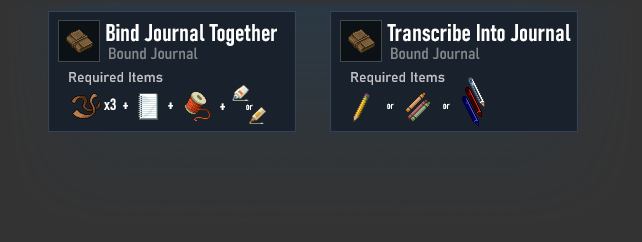
<style>
.page{position:relative;width:642px;height:242px;background:#19222c}
.page>*{position:absolute;margin:0}
.t1{font:24px "Bahnschrift-SemiBoldCondensed";color:#ffffff}
.t2{font:16px "Bahnschrift-SemiCondensed";color:#85888b}
.t3{font:14px "Bahnschrift";color:#c2c3c5}
.t4{font:16px "Bahnschrift-SemiBoldCondensed";color:#ffffff}
.t5{font:10px "Bahnschrift-SemiBoldCondensed";color:#ffffff}
</style>
<div class="page">
<p class="t1" style="left:106px;top:24px;width:171px;height:22px">Bind Journal Together</p>
<p class="t1" style="left:387px;top:24px;width:184px;height:18px">Transcribe Into Journal</p>
<p class="t2" style="left:109px;top:47px;width:89px;height:13px">Bound Journal</p>
<p class="t2" style="left:391px;top:47px;width:89px;height:13px">Bound Journal</p>
<p class="t3" style="left:69px;top:72px;width:94px;height:13px">Required Items</p>
<p class="t3" style="left:351px;top:72px;width:94px;height:13px">Required Items</p>
<p class="t4" style="left:104px;top:98px;width:12px;height:12px">x3</p>
<p class="t4" style="left:123px;top:102px;width:5px;height:7px">+</p>
<p class="t4" style="left:168px;top:102px;width:5px;height:7px">+</p>
<p class="t4" style="left:220px;top:103px;width:5px;height:7px">+</p>
<p class="t5" style="left:246px;top:104px;width:7px;height:6px">or</p>
<p class="t5" style="left:387px;top:103px;width:7px;height:6px">or</p>
<p class="t5" style="left:443px;top:103px;width:7px;height:6px">or</p>
</div>
